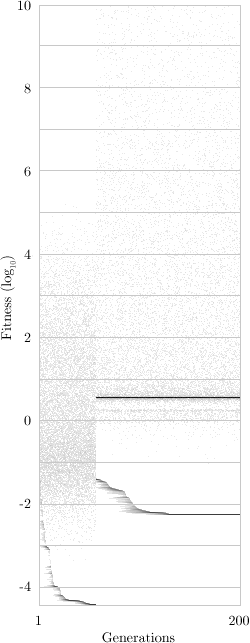
<style>
.page{position:relative;width:250px;height:643px;background:#ffffff}
.page>*{position:absolute;margin:0}
.t1{font:14px/20.8px "CMUSerif-Roman";color:#000000}
.t2{font:14px "CMUSerif-Roman";color:#000000}
</style>
<div class="page">
<p class="t1" style="left:18px;top:0px;width:13px;height:591px;text-align:right">10<br><br><br><br>8<br><br><br><br>6<br><br><br><br>4<br><br><br><br>2<br><br><br><br>0<br><br><br><br>-2<br><br><br><br>-4</p>
<p class="t2" style="left:0px;top:256px;width:16px;height:84px;rotate:-90deg">Fitness (log10)</p>
<p class="t2" style="left:36px;top:615px;width:213px;height:11px">1                                        200</p>
<p class="t2" style="left:102px;top:632px;width:73px;height:11px">Generations</p>
</div>
